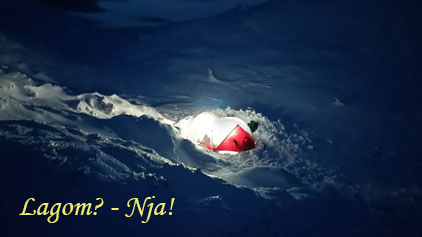
<style>
.page{position:relative;width:422px;height:237px}
.page>*{position:absolute;margin:0}
.t1{font:30px "MonotypeCorsiva";color:#eeed72}
</style>
<div class="page">
<p class="t1" style="left:19px;top:196px;width:156px;height:27px">Lagom? - Nja!</p>
</div>
